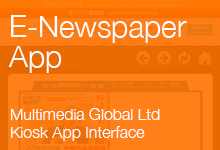
<style>
.page{position:relative;width:220px;height:150px;background:#ff8019}
.page>*{position:absolute;margin:0}
.t1{font:30px/30px "HelveticaNeue-Light";color:#ffffff}
.t2{font:16px/18px "HelveticaNeue-Light";color:#ffffff}
</style>
<div class="page">
<p class="t1" style="left:8px;top:15px;width:179px;height:58px">E-Newspaper<br>App</p>
<p class="t2" style="left:11px;top:108px;width:149px;height:33px">Multimedia Global Ltd<br>Kiosk App Interface</p>
</div>
